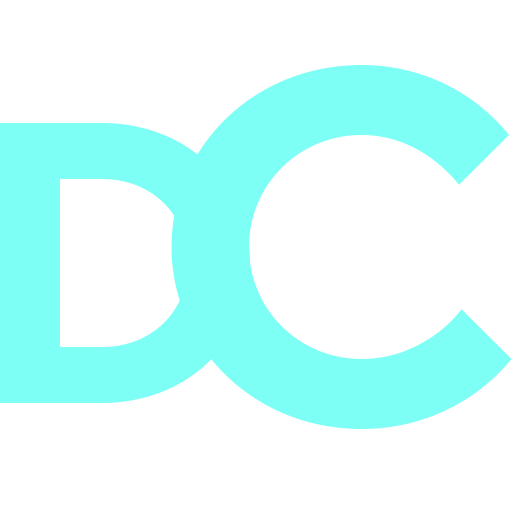
<style>
.page{position:relative;width:512px;height:512px;background:#ffffff}
.page>*{position:absolute;margin:0}
.t1{font:500px "TTNormsPro-Bold";color:#7efff5}
.t2{font:400px "TTNormsPro-Bold";color:#7efff5}
</style>
<div class="page">
<p class="t1" style="left:171px;top:65px;width:341px;height:364px">C</p>
<p class="t2" style="left:0px;top:123px;width:250px;height:280px">D</p>
</div>
